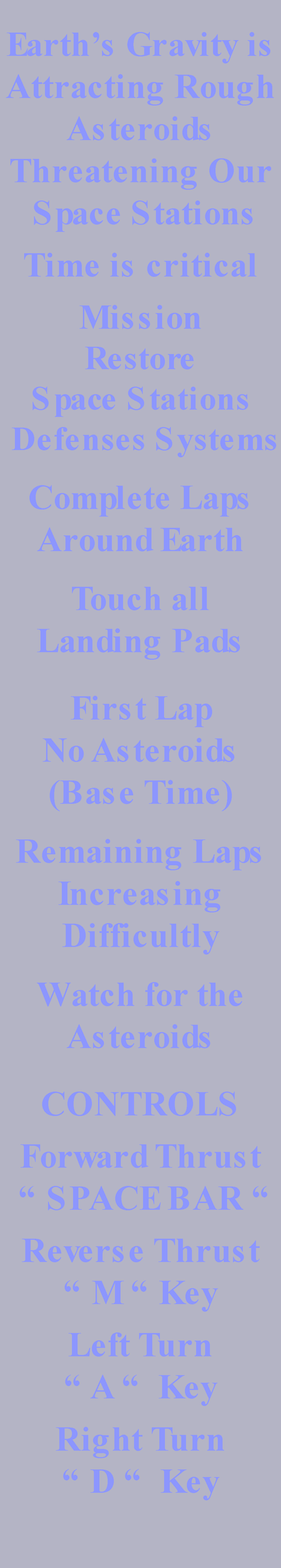
<style>
.page{position:relative;width:281px;height:1568px;background:#b4b4c5}
.page>*{position:absolute;margin:0}
.t1{font:35.1px "TimesNewRomanPS-BoldMT";color:#8c96ff}
.t2{font:33.7px "TimesNewRomanPS-BoldMT";color:#8c96ff}
</style>
<div class="page">
<p class="t1" style="left:6px;top:32px;width:270px;height:1468px;text-align:center">Earth’s Gravity is<br>Attracting Rough<br>Asteroids<br>Threatening Our<br> Space Stations<br> <br>Time is critical<br> <br>Mission<br><span class="t2">Restore<br>Space Stations<br> Defenses Systems<br> <br></span>Complete Laps<br>Around Earth<br> <br>Touch all<br>Landing Pads<br> <br>First Lap<br>No Asteroids<br>(Base Time)<br> <br>Remaining Laps<br>Increasing<br>Difficultly<br> <br>Watch for the Asteroids<br> <br>CONTROLS<br> <br>Forward Thrust<br> “ SPACE BAR “<br> <br>Reverse Thrust<br>“ M “ Key<br> <br>Left Turn<br>“ A “  Key<br> <br>Right Turn<br>“ D “  Key</p>
</div>
